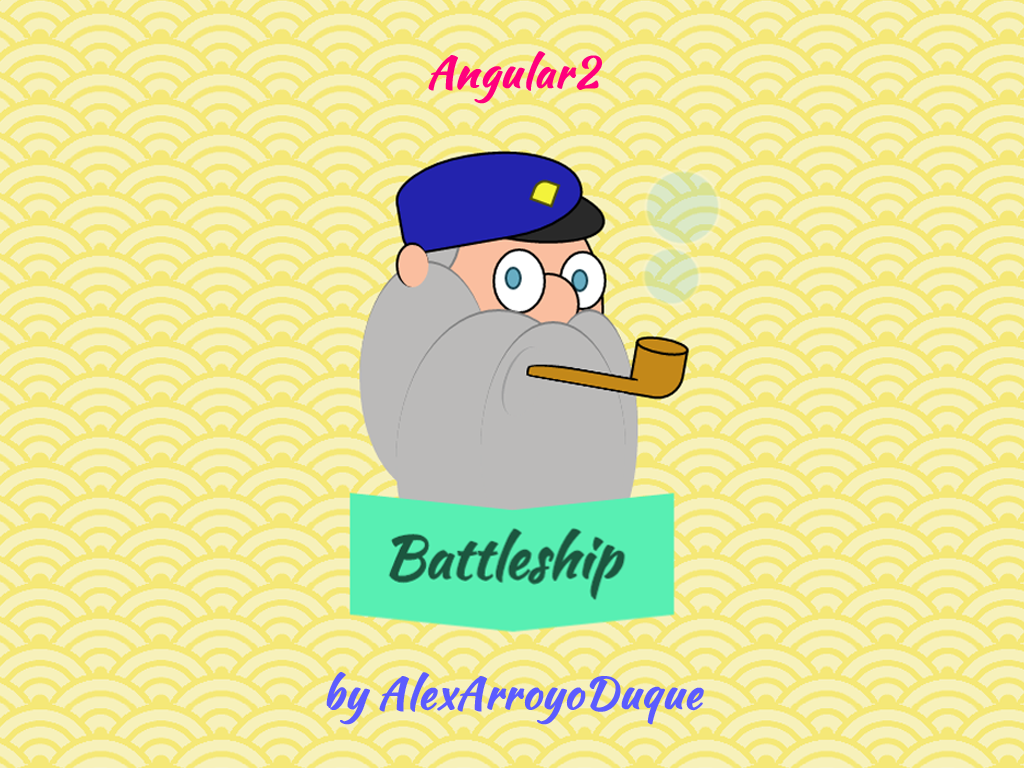
<style>
.page{position:relative;width:1024px;height:768px;background:#f7f1ba}
.page>*{position:absolute;margin:0}
.t1{font:43px "KaushanScript-Regular";color:#ff007d;font-weight:bold}
.t2{font:43px "KaushanScript-Regular";color:#5c5cff;font-weight:bold}
</style>
<div class="page">
<p class="t1" style="left:428px;top:51px;width:174px;height:53px">Angular2</p>
<p class="t2" style="left:326px;top:672px;width:378px;height:53px">by AlexArroyoDuque</p>
</div>
